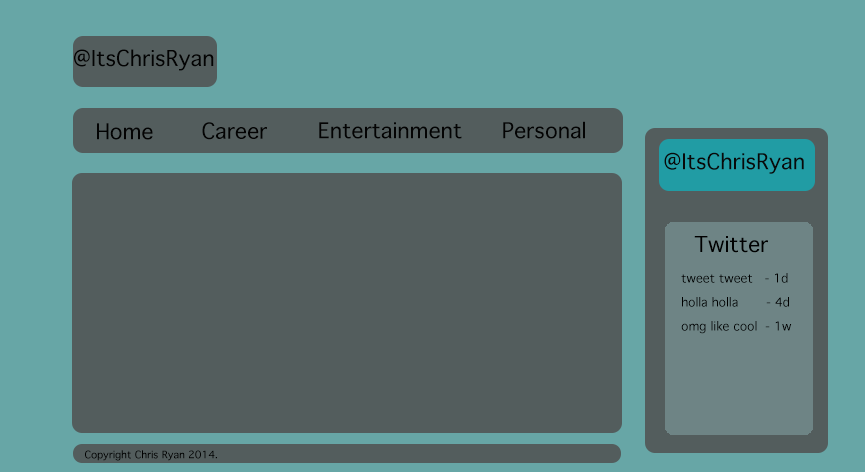
<style>
.page{position:relative;width:865px;height:472px;background:#535d5d}
.page>*{position:absolute;margin:0}
.t1{font:21px "Thonburi";color:#030303}
.t2{font:21px "Thonburi";color:#090909}
.t3{font:21px "Thonburi";color:#000000}
.t4{font:12px/24px "Thonburi";color:#000000}
.t5{font:10px "Thonburi";color:#000000}
</style>
<div class="page">
<p class="t1" style="left:74px;top:49px;width:140px;height:22px">@ItsChrisRyan</p>
<p class="t1" style="left:97px;top:123px;width:56px;height:17px">Home</p>
<p class="t1" style="left:202px;top:122px;width:65px;height:18px">Career</p>
<p class="t1" style="left:319px;top:122px;width:143px;height:17px">Entertainment</p>
<p class="t1" style="left:503px;top:121px;width:82px;height:18px">Personal</p>
<p class="t2" style="left:664px;top:152px;width:140px;height:22px">@ItsChrisRyan</p>
<p class="t3" style="left:694px;top:236px;width:74px;height:17px">Twitter</p>
<p class="t4" style="left:681px;top:273px;width:111px;height:61px">tweet tweet   - 1d<br>holla holla       - 4d<br>omg like cool  - 1w</p>
<p class="t5" style="left:85px;top:450px;width:132px;height:11px">Copyright Chris Ryan 2014.</p>
</div>
